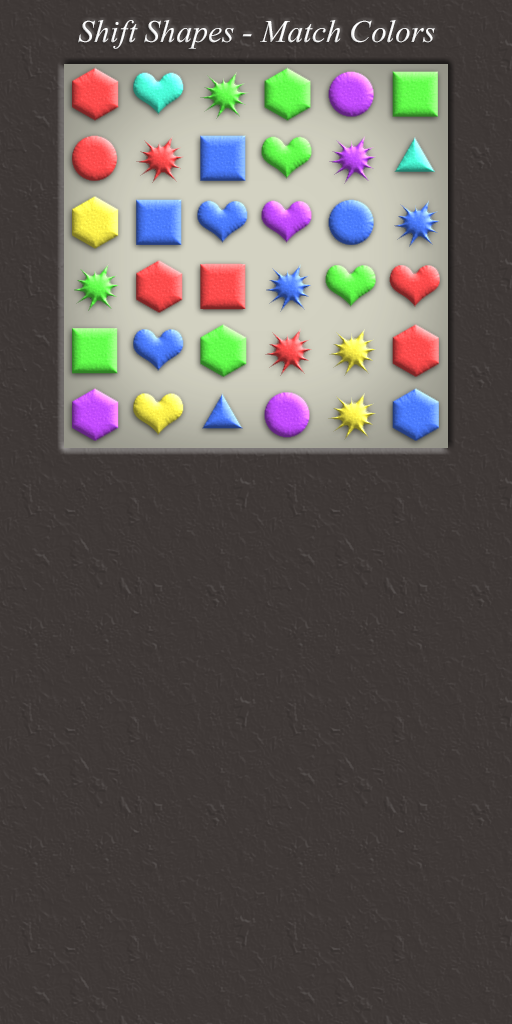
<style>
.page{position:relative;width:512px;height:1024px;background:#3e3836}
.page>*{position:absolute;margin:0}
.t1{font:48px "AngsanaUPC-Italic";color:#ffffff}
</style>
<div class="page">
<p class="t1" style="left:78px;top:20px;width:357px;height:29px">Shift Shapes - Match Colors</p>
</div>
